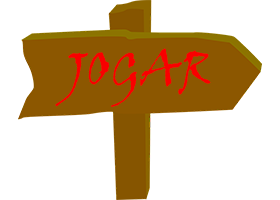
<style>
.page{position:relative;width:280px;height:200px;background:#ffffff}
.page>*{position:absolute;margin:0}
.t1{font:48px "VinerHandITC";color:#f90000}
</style>
<div class="page">
<p class="t1" style="left:55px;top:48px;width:156px;height:59px">JOGAR</p>
</div>
